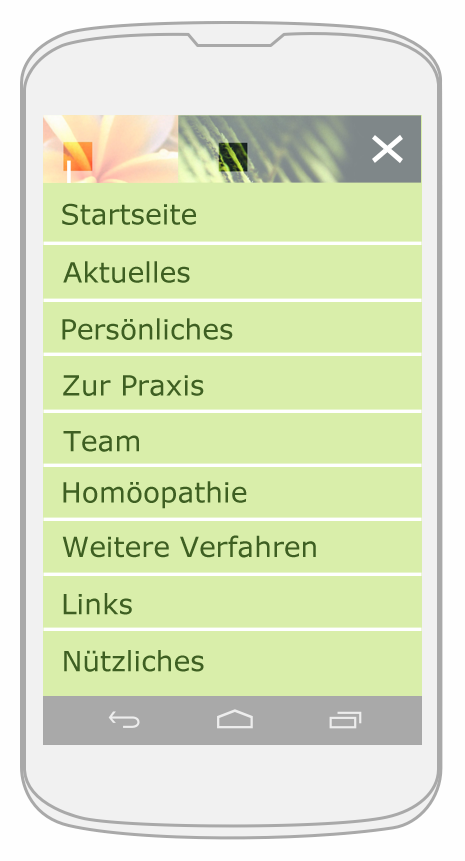
<style>
.page{position:relative;width:465px;height:861px;background:#d9eeaa}
.page>*{position:absolute;margin:0}
.t1{font:28px "Verdana";color:#3e5f22}
</style>
<div class="page">
<p class="t1" style="left:62px;top:203px;width:134px;height:22px">Startseite</p>
<p class="t1" style="left:63px;top:261px;width:127px;height:22px">Aktuelles</p>
<p class="t1" style="left:62px;top:318px;width:171px;height:22px">Persönliches</p>
<p class="t1" style="left:63px;top:375px;width:141px;height:21px">Zur Praxis</p>
<p class="t1" style="left:63px;top:431px;width:76px;height:21px">Team</p>
<p class="t1" style="left:63px;top:481px;width:184px;height:28px">Homöopathie</p>
<p class="t1" style="left:62px;top:535px;width:254px;height:23px">Weitere Verfahren</p>
<p class="t1" style="left:63px;top:593px;width:69px;height:22px">Links</p>
<p class="t1" style="left:64px;top:650px;width:140px;height:22px">Nützliches</p>
</div>
